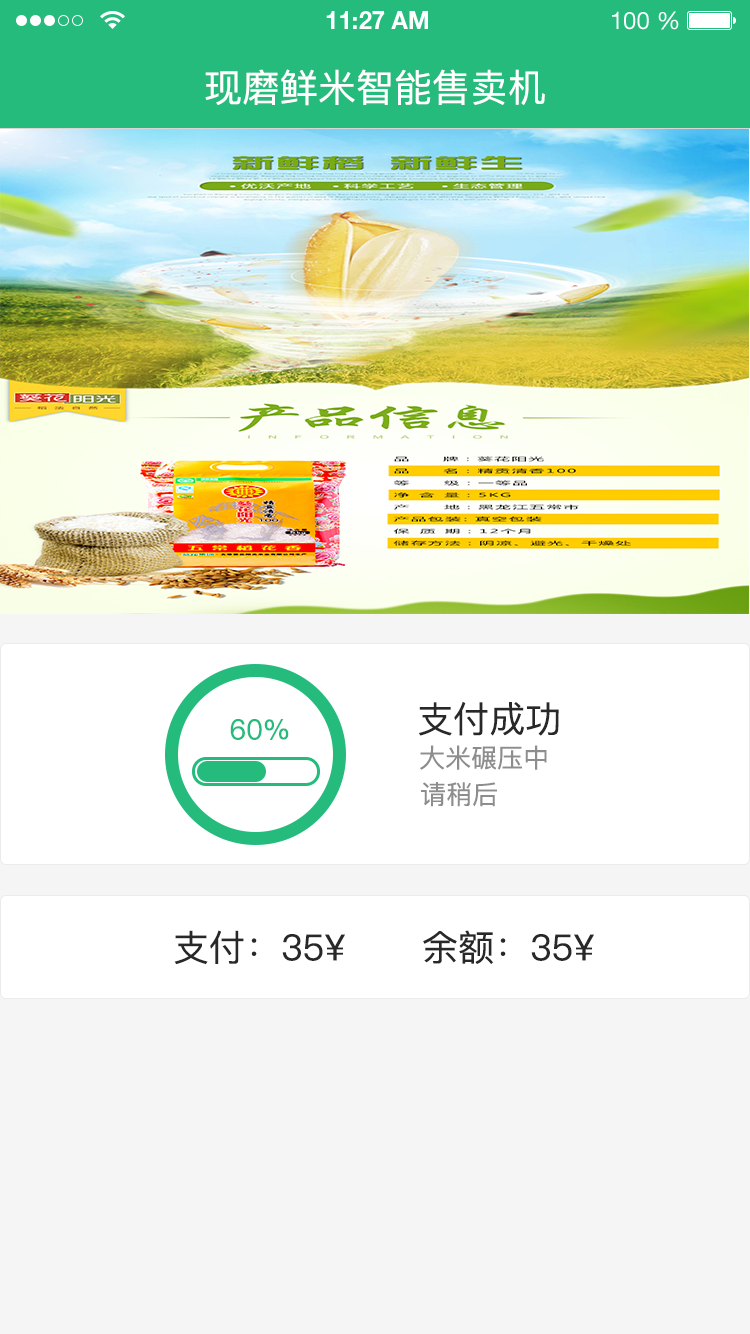
<style>
.page{position:relative;width:750px;height:1334px;background:#f5f5f5}
.page>*{position:absolute;margin:0}
.t1{font:24px "HelveticaNeueLTStd-Bd";color:#ffffff}
.t2{font:24px "HelveticaNeueLTStd-Roman";color:#ffffff}
.t3{font:38px "PingFangSC-Regular";color:#ffffff}
.t4{font:36px "PingFangSC-Regular";color:#282828}
.t5{font:28px "PingFangSC-Regular";color:#24bb7d}
.t6{font:26px "PingFangSC-Regular";color:#8e8d8e}
</style>
<div class="page">
<p class="t1" style="left:326px;top:11px;width:102px;height:18px">11:27 AM</p>
<p class="t2" style="left:612px;top:11px;width:67px;height:19px">100 %</p>
<p class="t3" style="left:205px;top:69px;width:340px;height:37px">现磨鲜米智能售卖机</p>
<p class="t4" style="left:419px;top:701px;width:140px;height:35px">支付成功</p>
<p class="t5" style="left:230px;top:719px;width:59px;height:21px">60%</p>
<p class="t6" style="left:420px;top:745px;width:127px;height:25px">大米碾压中</p>
<p class="t6" style="left:421px;top:782px;width:76px;height:25px">请稍后</p>
<p class="t4" style="left:174px;top:930px;width:171px;height:34px">支付：35¥</p>
<p class="t4" style="left:423px;top:930px;width:171px;height:34px">余额：35¥</p>
</div>
